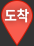
<style>
.page{position:relative;width:34px;height:46px;background:#333333}
.page>*{position:absolute;margin:0}
.t1{font:14px "NanumSquareEB";color:#ffffff;scale:0.96 1}
</style>
<div class="page">
<p class="t1" style="left:4px;top:8px;width:25px;height:15px">도착</p>
</div>
